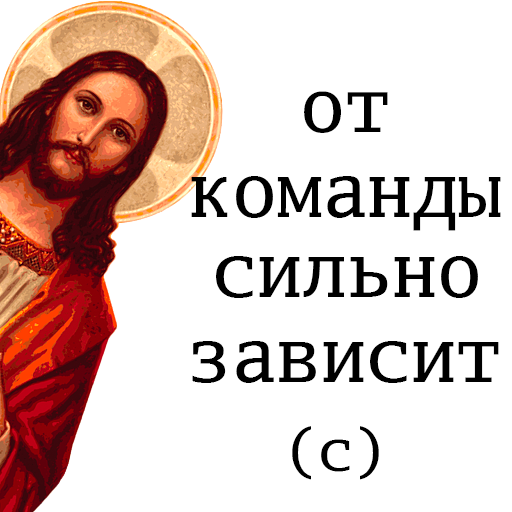
<style>
.page{position:relative;width:512px;height:512px;background:#ffffff}
.page>*{position:absolute;margin:0}
.t1{font:75px "GoMonoForPowerline";color:#000000}
.t2{font:58.3px "GoMonoForPowerline";color:#000000}
</style>
<div class="page">
<p class="t1" style="left:304px;top:91px;width:84px;height:42px">от</p>
<p class="t1" style="left:191px;top:176px;width:310px;height:55px">команды</p>
<p class="t1" style="left:216px;top:256px;width:262px;height:42px">сильно</p>
<p class="t1" style="left:192px;top:341px;width:307px;height:42px">зависит</p>
<p class="t2" style="left:292px;top:426px;width:87px;height:54px">(с)</p>
</div>
